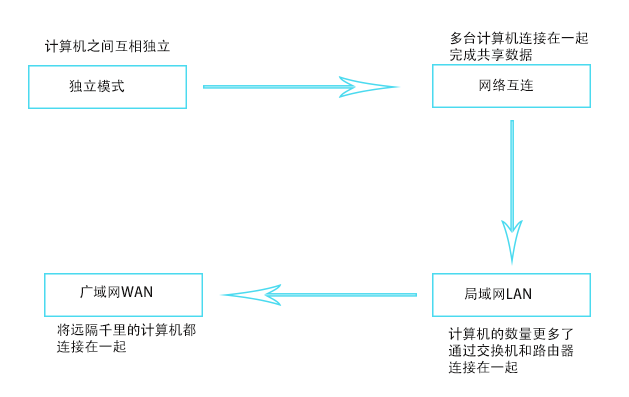
<style>
.page{position:relative;width:629px;height:397px;background:#ffffff}
.page>*{position:absolute;margin:0}
.t1{font:14px "AdobeHeitiStd-Regular";color:#141212}
</style>
<div class="page">
<p class="t1" style="left:45px;top:39px;width:125px;height:14px">计算机之间互相独立</p>
<p class="t1" style="left:450px;top:31px;width:139px;height:30px">多台计算机连接在一起<br>完成共享数据</p>
<p class="t1" style="left:479px;top:78px;width:55px;height:14px">网络互连</p>
<p class="t1" style="left:69px;top:79px;width:56px;height:14px">独立模式</p>
<p class="t1" style="left:80px;top:285px;width:72px;height:14px">广域网WAN</p>
<p class="t1" style="left:464px;top:287px;width:67px;height:13px">局域网LAN</p>
<p class="t1" style="left:56px;top:323px;width:140px;height:30px">将远隔千里的计算机都<br>连接在一起</p>
<p class="t1" style="left:448px;top:327px;width:126px;height:47px">计算机的数量更多了<br>通过交换机和路由器<br>连接在一起</p>
</div>
